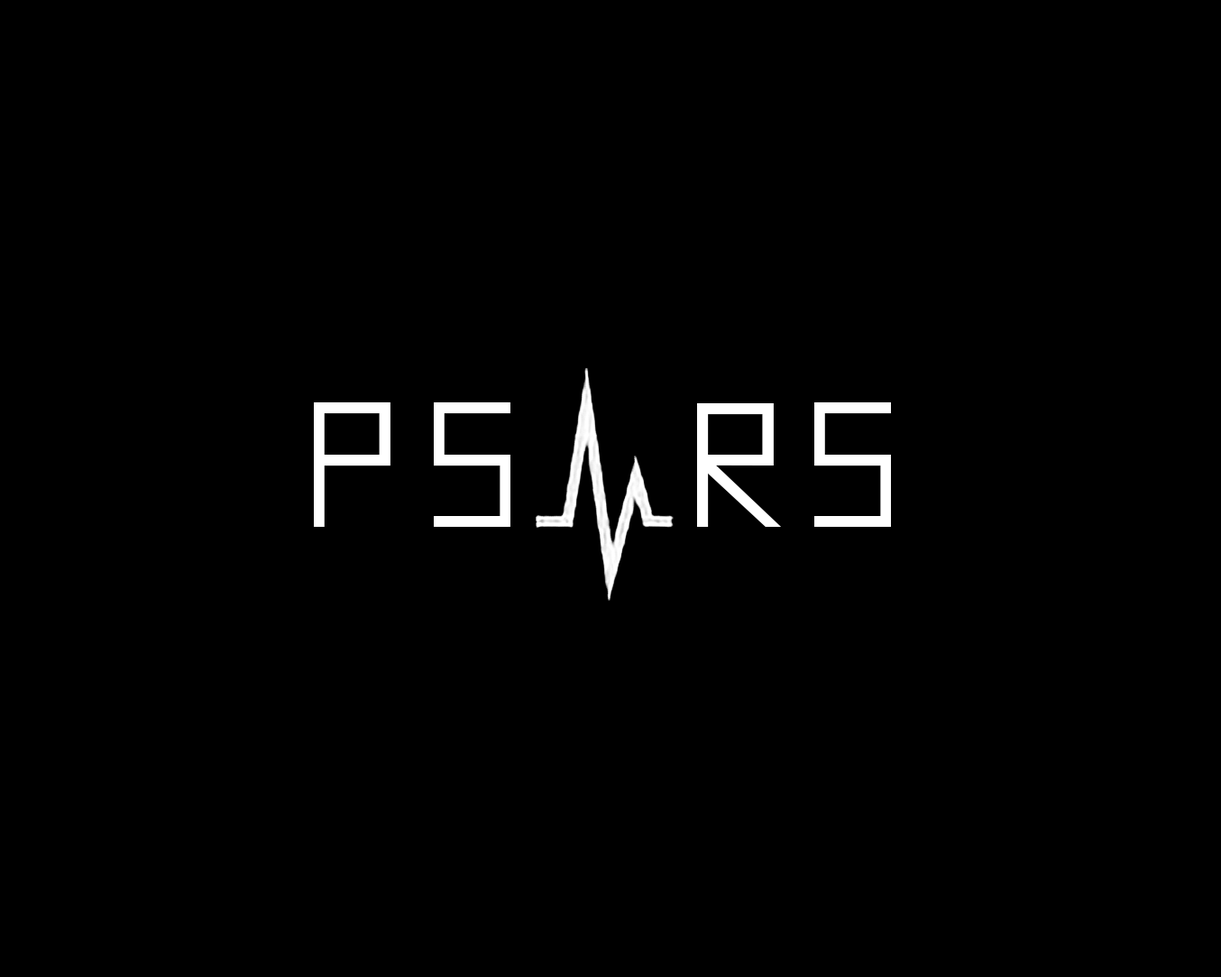
<style>
.page{position:relative;width:1221px;height:977px;background:#000000}
.page>*{position:absolute;margin:0}
.t1{font:169.1px "AMOceanus";letter-spacing:0.2em;color:#ffffff}
.t2{font:169.1px "AMOceanus";letter-spacing:0.15em;color:#ffffff}
</style>
<div class="page">
<p class="t1" style="left:314px;top:402px;width:196px;height:125px">PS</p>
<p class="t2" style="left:697px;top:402px;width:194px;height:125px">RS</p>
</div>
